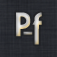
<style>
.page{position:relative;width:57px;height:57px}
.page>*{position:absolute;margin:0}
.t1{font:31.7px "MovementBold"}
.t2{font:34px "MovementBold"}
</style>
<div class="page">
<p class="t1" style="left:16px;top:12px;width:26px;height:33px">Pf</p>
<p class="t2" style="left:23px;top:31px;width:10px;height:4px">-</p>
</div>
